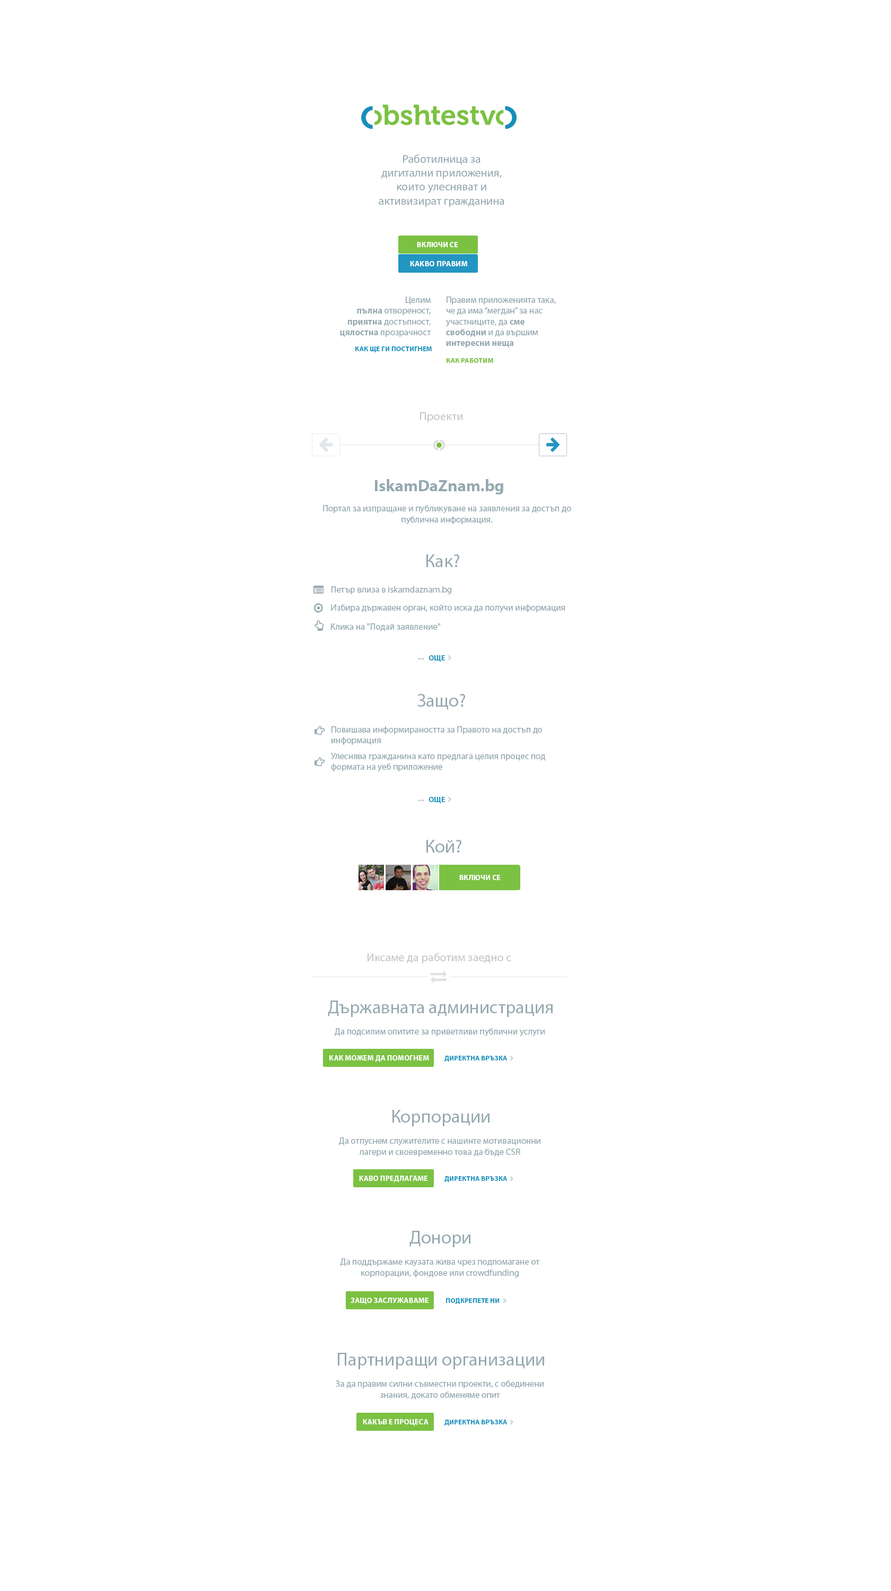
<style>
.page{position:relative;width:891px;height:1591px;background:#ffffff}
.page>*{position:absolute;margin:0}
.t1{font:11.6px "MyriadPro-Regular";color:#94a8af}
.t2{font:7.4px "MyriadPro-Bold";color:#ffffff;text-transform:uppercase}
.t3{font:7.6px "MyriadPro-Bold";color:#ffffff;text-transform:uppercase}
.t4{font:9px "MyriadPro-Regular";color:#94a8af}
.t5{font:9px "MyriadPro-Bold";color:#94a8af}
.t6{font:7.1px "MyriadPro-Bold";color:#2296c1;text-transform:uppercase;scale:0.97 1}
.t7{font:7.1px "MyriadPro-Bold";color:#7bc142;text-transform:uppercase}
.t8{font:11.7px "MyriadPro-Regular";color:#c7c7c7}
.t9{font:16.6px "MyriadPro-Bold";color:#94a8af}
.t10{font:18.3px "MyriadPro-Regular";color:#94a8af}
.t11{font:10.3px "MyriadPro-Regular";color:#94a8af}
.t12{font:7.7px "MyriadPro-Bold";color:#2296c1;text-transform:uppercase}
</style>
<div class="page">
<p class="t1" style="left:379px;top:154px;width:126px;height:53px;text-align:center">Работилница за дигитални приложения, <br>които улесняват и активизират гражданина</p>
<p class="t2" style="left:417px;top:242px;width:41px;height:5px">Включи се</p>
<p class="t3" style="left:410px;top:261px;width:57px;height:5px">Какво правим</p>
<p class="t4" style="left:340px;top:297px;width:91px;height:40px;text-align:right">Целим<br><span class="t5">пълна </span>отвореност, <span class="t5">приятна </span>достъпност, <span class="t5">цялостна </span>прозрачност</p>
<p class="t4" style="left:446px;top:297px;width:110px;height:51px">Правим приложенията така, че да има “мегдан” за нас участниците, да <span class="t5">сме свободни</span> и да вършим  <span class="t5">интересни неща</span></p>
<p class="t6" style="left:356px;top:347px;width:76px;height:6px">как ЩЕ ГИ ПОСТИГНЕМ</p>
<p class="t7" style="left:447px;top:358px;width:46px;height:5px">как работим</p>
<p class="t8" style="left:420px;top:412px;width:43px;height:10px">Проекти</p>
<p class="t9" style="left:375px;top:479px;width:129px;height:16px">IskamDaZnam.bg</p>
<p class="t4" style="left:323px;top:505px;width:248px;height:20px;text-align:center">Портал за изпращане и публикуване на заявления за достъп до публична информация.</p>
<p class="t10" style="left:427px;top:555px;width:33px;height:12px">Как?</p>
<p class="t4" style="left:332px;top:586px;width:120px;height:8px">Петър влиза в iskamdaznam.bg</p>
<p class="t4" style="left:331px;top:604px;width:234px;height:9px">Избира държавен орган, който иска да получи информация</p>
<p class="t4" style="left:331px;top:623px;width:110px;height:8px">Клика на "Подай заявление"</p>
<p class="t11" style="left:419px;top:658px;width:6px;height:2px">...</p>
<p class="t12" style="left:429px;top:655px;width:16px;height:7px">Oще</p>
<p class="t10" style="left:418px;top:694px;width:47px;height:16px">Защо?</p>
<p class="t4" style="left:332px;top:726px;width:210px;height:19px">Повишава информираността за Правото на достъп до информация</p>
<p class="t4" style="left:331px;top:753px;width:214px;height:19px">Улеснява гражданина като предлага целия процес под формата на уеб приложение</p>
<p class="t12" style="left:429px;top:797px;width:16px;height:7px">Oще</p>
<p class="t11" style="left:419px;top:800px;width:6px;height:1px">...</p>
<p class="t10" style="left:427px;top:840px;width:35px;height:13px">Кой?</p>
<p class="t2" style="left:460px;top:875px;width:40px;height:5px">Включи се</p>
<p class="t8" style="left:367px;top:953px;width:145px;height:11px">Иксаме да работим заедно с</p>
<p class="t10" style="left:328px;top:1001px;width:225px;height:16px">Държавната администрация</p>
<p class="t4" style="left:335px;top:1028px;width:210px;height:9px">Да подсилим опитите за приветливи публични услуги</p>
<p class="t2" style="left:330px;top:1055px;width:99px;height:7px">КАК Можем да помогнем</p>
<p class="t6" style="left:445px;top:1056px;width:63px;height:6px">Директна връзка</p>
<p class="t10" style="left:393px;top:1110px;width:97px;height:17px">Корпорации</p>
<p class="t4" style="left:339px;top:1138px;width:202px;height:19px;text-align:center">Да отпуснем служителите с нашинте мотивационни лагери и своевременно това да бъде CSR</p>
<p class="t2" style="left:359px;top:1176px;width:69px;height:7px">каво предлагаме</p>
<p class="t6" style="left:445px;top:1176px;width:63px;height:7px">Директна връзка</p>
<p class="t10" style="left:410px;top:1231px;width:61px;height:17px">Донори</p>
<p class="t4" style="left:340px;top:1259px;width:200px;height:19px;text-align:center">Да поддържаме каузата жива чрез подпомагане от корпорации, фондове или crowdfunding</p>
<p class="t2" style="left:351px;top:1298px;width:78px;height:7px">Защо заслужаваме</p>
<p class="t6" style="left:446px;top:1298px;width:53px;height:7px">подкрепете ни</p>
<p class="t10" style="left:338px;top:1353px;width:206px;height:17px">Партниращи организации</p>
<p class="t4" style="left:336px;top:1381px;width:208px;height:19px;text-align:center">За да правим силни съвместни проекти, с обединени знания, докато обменяме опит</p>
<p class="t2" style="left:363px;top:1419px;width:66px;height:7px">какъв е процеса</p>
<p class="t6" style="left:445px;top:1420px;width:63px;height:6px">Директна връзка</p>
</div>
